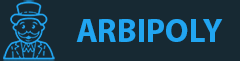
<style>
.page{position:relative;width:240px;height:61px;background:#172933}
.page>*{position:absolute;margin:0}
.t1{font:32.9px "MyriadPro-Bold";color:#21a5f1}
</style>
<div class="page">
<p class="t1" style="left:76px;top:19px;width:147px;height:23px">ARBIPOLY</p>
</div>
